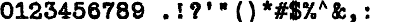
<style>
.page{position:relative;width:399px;height:22px;background:#ffffff}
.page>*{position:absolute;margin:0}
.t1{font:24px "GabrieleBlackRibbonFG";color:#000000}
</style>
<div class="page">
<p class="t1" style="left:0px;top:0px;width:370px;height:24px">0123456789 .!?'"()*#$%^&amp;,:</p>
</div>
